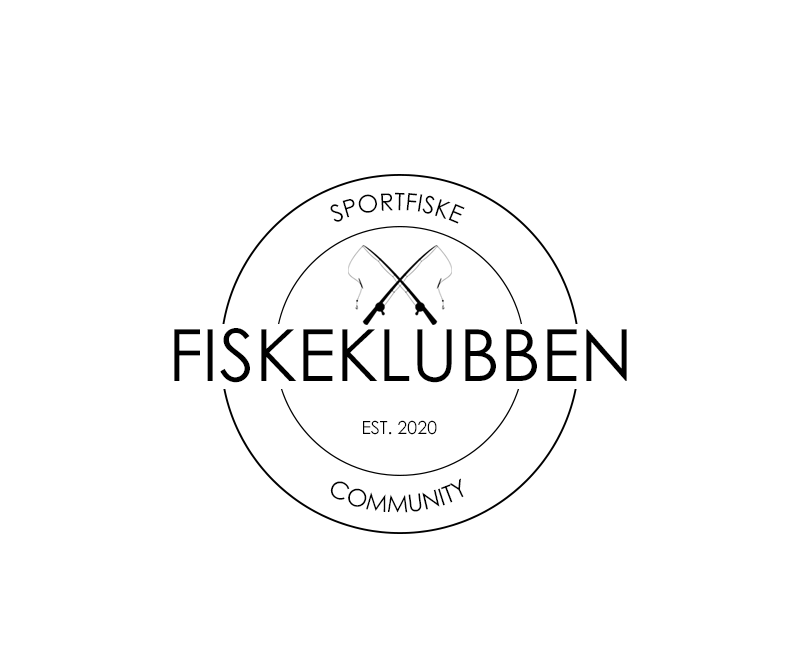
<style>
.page{position:relative;width:800px;height:650px;background:#ffffff}
.page>*{position:absolute;margin:0}
.t1{font:24px "CenturyGothic";color:#000000}
.t2{font:72px "CenturyGothic";color:#000000}
.t3{font:18px "CenturyGothic";color:#000000}
</style>
<div class="page">
<p class="t1" style="left:330px;top:192px;width:135px;height:32px;rotate:180deg">SPORTFISKE</p>
<p class="t2" style="left:174px;top:328px;width:453px;height:55px">FISKEKLUBBEN</p>
<p class="t3" style="left:363px;top:420px;width:74px;height:15px">EST. 2020</p>
<p class="t1" style="left:330px;top:478px;width:134px;height:35px">COMMUNITY</p>
</div>
